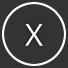
<style>
.page{position:relative;width:68px;height:68px;background:#333333}
.page>*{position:absolute;margin:0}
.t1{font:30px "NanumSquareR";color:#ffffff}
</style>
<div class="page">
<p class="t1" style="left:25px;top:24px;width:18px;height:22px">X</p>
</div>
